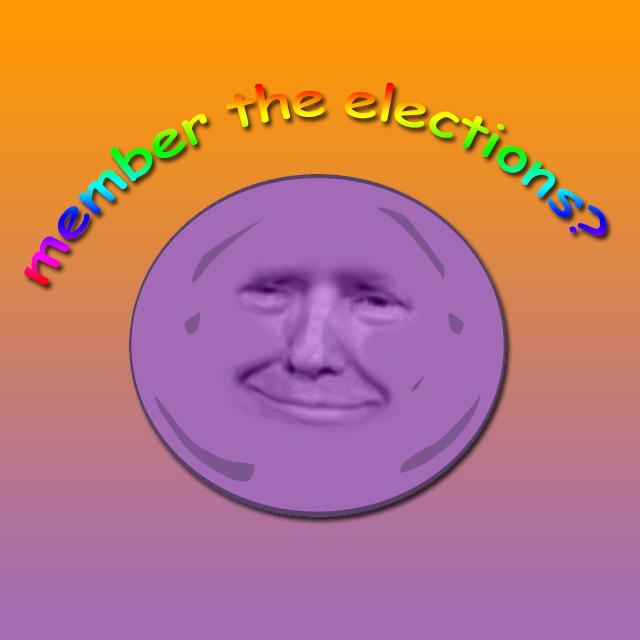
<style>
.page{position:relative;width:640px;height:640px}
.page>*{position:absolute;margin:0}
.t1{font:48px/88px "ComicSansMS";letter-spacing:-0.01em}
</style>
<div class="page">
<p class="t1" style="left:24px;top:82px;width:583px;height:203px">member the elections?</p>
</div>
